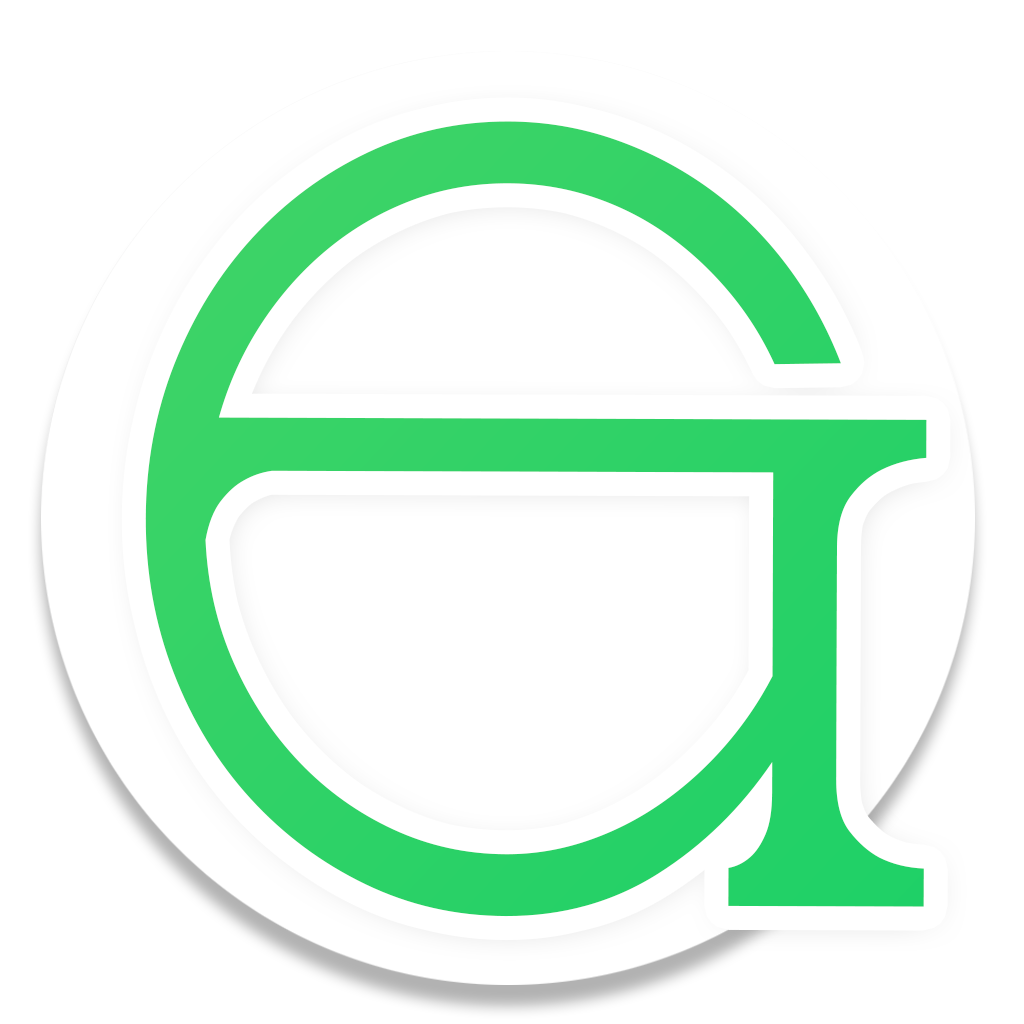
<style>
.page{position:relative;width:1024px;height:1024px;background:#ffffff}
.page>*{position:absolute;margin:0}
.t1{font:1084px "Fuego923";color:#30d267}
</style>
<div class="page">
<p class="t1" style="left:145px;top:121px;width:782px;height:796px">G</p>
</div>
